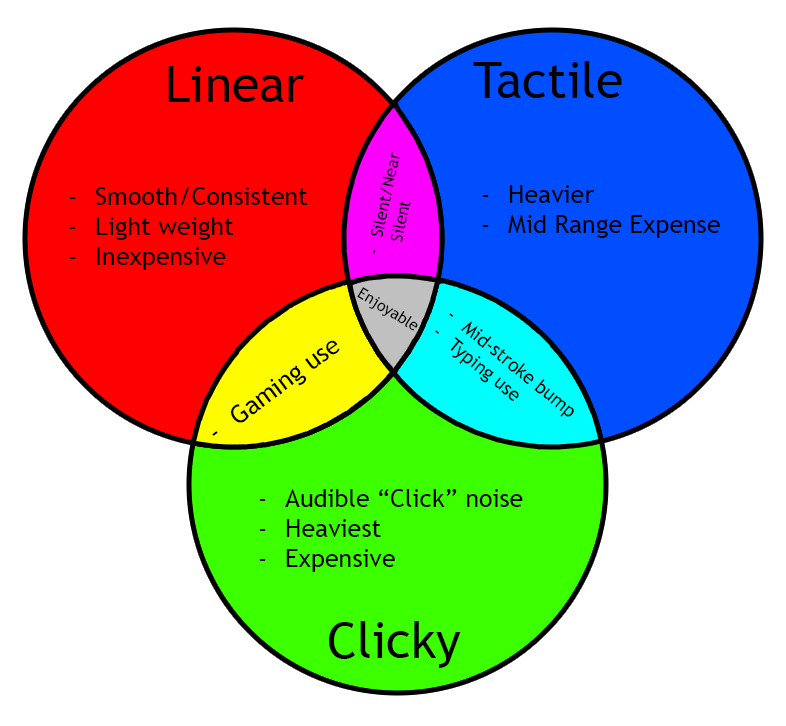
<style>
.page{position:relative;width:786px;height:726px;background:#ffffff}
.page>*{position:absolute;margin:0}
.t1{font:50px "TrebuchetMS";color:#020202}
.t2{font:16.7px "TrebuchetMS";color:#020202}
.t3{font:25px "TrebuchetMS";color:#020202}
.t4{font:15.6px "TrebuchetMS";color:#020202}
.t5{font:18.7px "TrebuchetMS";color:#020202}
</style>
<div class="page">
<p class="t1" style="left:473px;top:61px;width:149px;height:37px">Tactile</p>
<p class="t1" style="left:168px;top:66px;width:137px;height:36px">Linear</p>
<p class="t2" style="left:370px;top:152px;width:41px;height:102px;rotate:-78deg">Silent/Near <br>Silent</p>
<p class="t3" style="left:482px;top:185px;width:238px;height:53px">Heavier<br>Mid Range Expense</p>
<p class="t3" style="left:69px;top:187px;width:239px;height:83px">Smooth/Consistent<br>Light weight<br>Inexpensive</p>
<p class="t4" style="left:357px;top:287px;width:61px;height:44px;rotate:32deg">Enjoyable</p>
<p class="t5" style="left:435px;top:313px;width:139px;height:104px;rotate:39deg">Mid-stroke bump<br>Typing use</p>
<p class="t3" style="left:212px;top:340px;width:128px;height:96px;rotate:-36deg">Gaming use</p>
<p class="t3" style="left:259px;top:489px;width:264px;height:83px">Audible “Click” noise<br>Heaviest<br>Expensive</p>
<p class="t1" style="left:329px;top:621px;width:132px;height:47px">Clicky</p>
</div>
